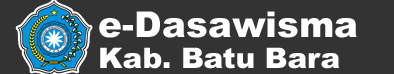
<style>
.page{position:relative;width:394px;height:74px;background:#333333}
.page>*{position:absolute;margin:0}
.t1{font:35.4px "Arial-Black";color:#ffffff}
.t2{font:28.2px "Arial-Black";color:#ffffff;scale:1.04 1}
</style>
<div class="page">
<p class="t1" style="left:99px;top:11px;width:258px;height:27px">e-Dasawisma</p>
<p class="t2" style="left:100px;top:47px;width:240px;height:22px">Kab. Batu Bara</p>
</div>
